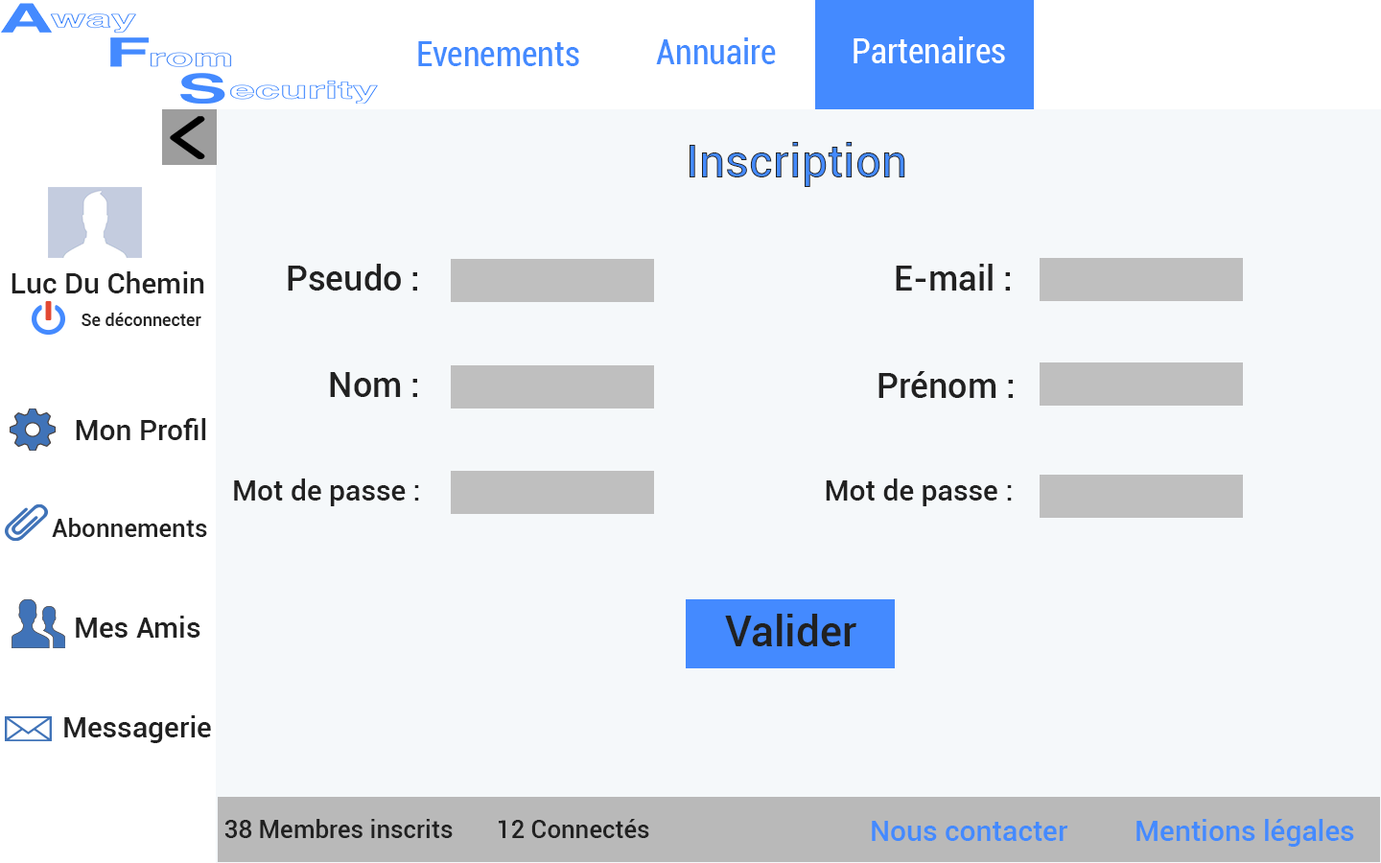
<style>
.page{position:relative;width:1381px;height:863px;background:#f5f8fa}
.page>*{position:absolute;margin:0}
.t1{font:34.5px "Roboto-Condensed";color:#448aff}
.t2{font:34.5px "Roboto-Condensed";color:#ffffff}
.t3{font:46px "Roboto-Medium"}
.t4{font:34.5px "Roboto-Medium";color:#212121}
.t5{font:28.8px "Roboto-Medium";color:#212121}
.t6{font:17.3px "Roboto-Medium";color:#212121}
.t7{font:24.9px "Roboto-Medium";color:#212121}
.t8{font:42.2px "Roboto-Medium";color:#212121}
.t9{font:28.8px "Roboto-Medium";color:#448aff}
</style>
<div class="page">
<p class="t1" style="left:418px;top:41px;width:161px;height:25px">Evenements</p>
<p class="t1" style="left:656px;top:37px;width:120px;height:27px">Annuaire</p>
<p class="t2" style="left:854px;top:36px;width:151px;height:27px">Partenaires</p>
<p class="t3" style="left:690px;top:142px;width:215px;height:45px">Inscription</p>
<p class="t4" style="left:288px;top:264px;width:129px;height:27px">Pseudo :</p>
<p class="t4" style="left:896px;top:264px;width:114px;height:27px">E-mail :</p>
<p class="t5" style="left:12px;top:271px;width:192px;height:23px">Luc Du Chemin</p>
<p class="t6" style="left:82px;top:313px;width:119px;height:13px">Se déconnecter</p>
<p class="t4" style="left:330px;top:372px;width:87px;height:25px">Nom :</p>
<p class="t4" style="left:879px;top:371px;width:134px;height:27px">Prénom :</p>
<p class="t5" style="left:76px;top:418px;width:130px;height:22px">Mon Profil</p>
<p class="t5" style="left:234px;top:479px;width:185px;height:27px">Mot de passe :</p>
<p class="t5" style="left:826px;top:479px;width:186px;height:27px">Mot de passe :</p>
<p class="t7" style="left:52px;top:518px;width:155px;height:19px">Abonnements</p>
<p class="t5" style="left:76px;top:616px;width:124px;height:22px">Mes Amis</p>
<p class="t8" style="left:725px;top:614px;width:132px;height:33px">Valider</p>
<p class="t5" style="left:64px;top:716px;width:147px;height:27px">Messagerie</p>
<p class="t7" style="left:224px;top:819px;width:425px;height:19px">38 Membres inscrits       12 Connectés</p>
<p class="t9" style="left:872px;top:821px;width:197px;height:20px">Nous contacter</p>
<p class="t9" style="left:1137px;top:819px;width:217px;height:28px">Mentions légales</p>
</div>
